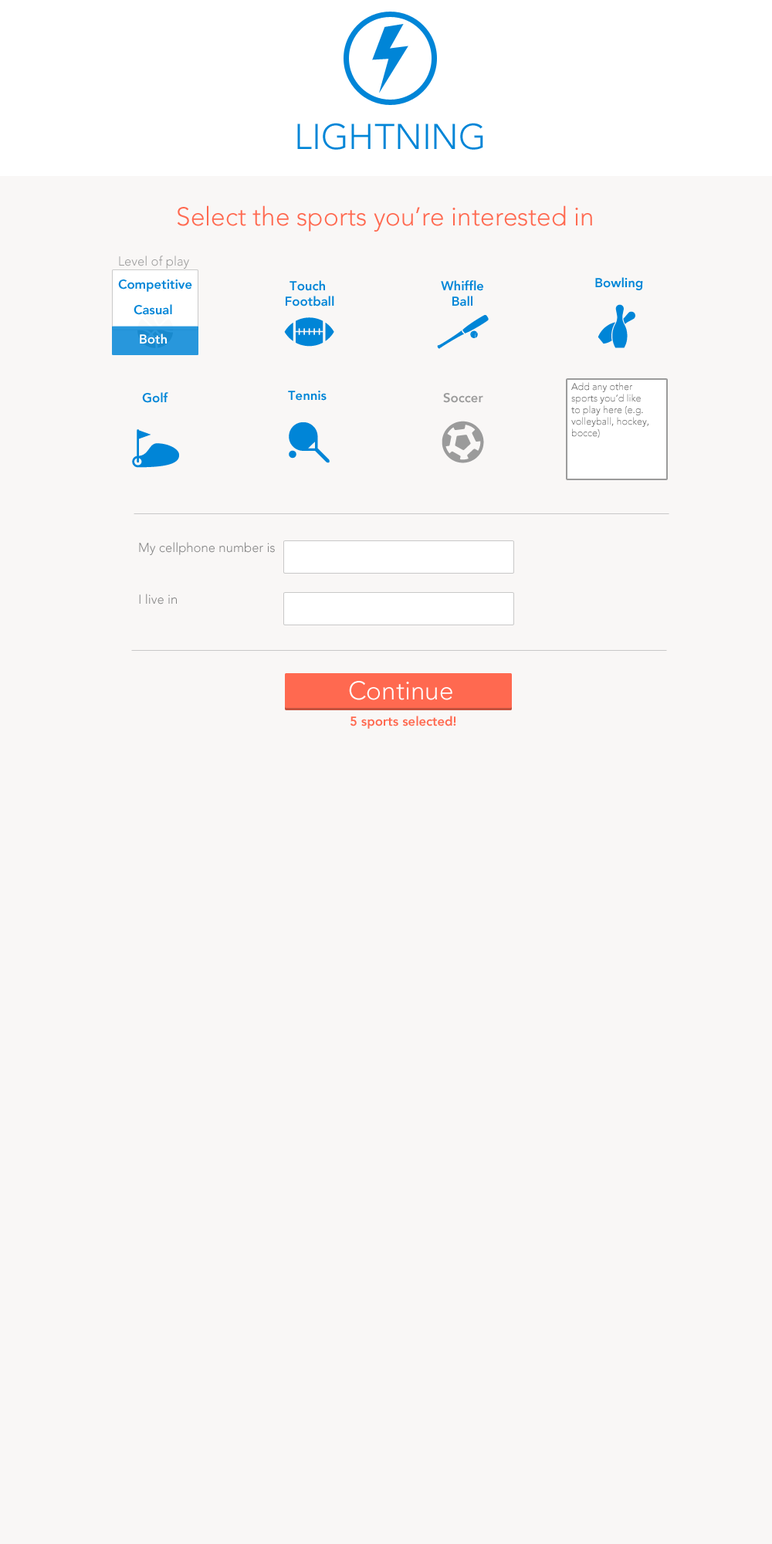
<style>
.page{position:relative;width:772px;height:1544px;background:#f9f7f6}
.page>*{position:absolute;margin:0}
.t1{font:35.4px "AvenirLTPro-Light";color:#0085d7;text-transform:uppercase}
.t2{font:25.7px "AvenirLTPro-Light";color:#ff6950}
.t3{font:12.9px "AvenirLTPro-Light";color:#9b9b9b}
.t4{font:12.9px "AvenirLTPro-Heavy";color:#0085d7}
.t5{font:12.9px "AvenirLTPro-Heavy";color:#ffffff}
.t6{font:9.7px "AvenirLTPro-Light";color:#5c5c5c}
.t7{font:12.9px "AvenirLTPro-Heavy";color:#9b9b9b}
.t8{font:12.9px "AvenirLTPro-Light";color:#848484}
.t9{font:25.7px "AvenirLTPro-Light";color:#ffffff}
.t10{font:12.9px "AvenirLTPro-Heavy";color:#ff6950}
</style>
<div class="page">
<p class="t1" style="left:297px;top:123px;width:186px;height:27px">Lightning</p>
<p class="t2" style="left:177px;top:205px;width:415px;height:27px">Select the sports you’re interested in</p>
<p class="t3" style="left:119px;top:256px;width:70px;height:13px">Level of play</p>
<p class="t4" style="left:118px;top:280px;width:74px;height:12px">Competitive</p>
<p class="t4" style="left:286px;top:280px;width:48px;height:27px;text-align:center">Touch <br>Football</p>
<p class="t4" style="left:441px;top:280px;width:42px;height:27px;text-align:center">Whiffle<br>Ball</p>
<p class="t4" style="left:595px;top:277px;width:48px;height:13px">Bowling</p>
<p class="t4" style="left:134px;top:304px;width:38px;height:11px">Casual</p>
<p class="t5" style="left:140px;top:334px;width:27px;height:10px">Both</p>
<p class="t6" style="left:571px;top:382px;width:78px;height:56px">Add any other <br>sports you’d like <br>to play here (e.g.<br>volleyball, hockey,<br>bocce)</p>
<p class="t4" style="left:142px;top:392px;width:26px;height:11px">Golf</p>
<p class="t4" style="left:288px;top:391px;width:39px;height:10px">Tennis</p>
<p class="t7" style="left:443px;top:393px;width:40px;height:10px">Soccer</p>
<p class="t8" style="left:139px;top:542px;width:136px;height:13px">My cellphone number is</p>
<p class="t8" style="left:139px;top:594px;width:38px;height:11px">I live in</p>
<p class="t9" style="left:349px;top:681px;width:103px;height:19px">Continue</p>
<p class="t10" style="left:350px;top:716px;width:106px;height:13px">5 sports selected!</p>
</div>
